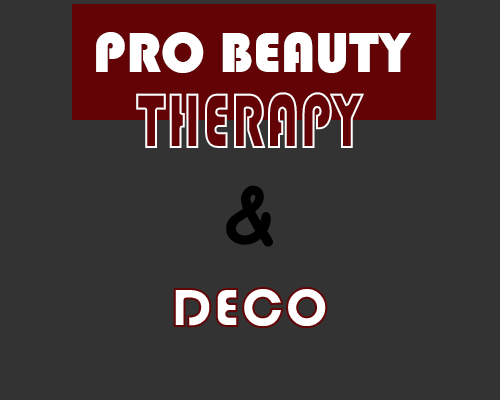
<style>
.page{position:relative;width:500px;height:400px;background:#333333}
.page>*{position:absolute;margin:0}
.t1{font:58.3px "Bauhaus93";color:#ffffff}
.t2{font:80.9px "Bauhaus93";color:#640305;scale:0.72 1}
.t3{font:75px "ComicSansMS-Bold";color:#000000}
</style>
<div class="page">
<p class="t1" style="left:96px;top:32px;width:315px;height:41px">PRO BEAUTY</p>
<p class="t2" style="left:136px;top:92px;width:228px;height:56px">THERAPY</p>
<p class="t3" style="left:226px;top:185px;width:47px;height:62px">&amp;</p>
<p class="t1" style="left:173px;top:287px;width:155px;height:41px">DECO</p>
</div>
